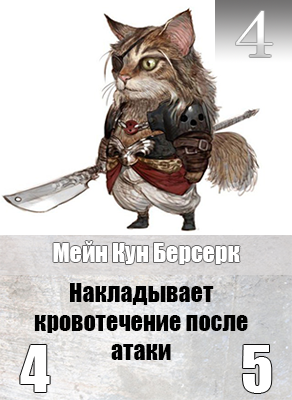
<style>
.page{position:relative;width:292px;height:400px;background:#ffffff}
.page>*{position:absolute;margin:0}
.t1{font:65.6px "Century";color:#ffffff;scale:1.18 1}
.t2{font:24px "Impact";color:#ffffff}
.t3{font:24px "Impact";color:#000000}
</style>
<div class="page">
<p class="t1" style="left:236px;top:11px;width:37px;height:46px">4</p>
<p class="t2" style="left:53px;top:241px;width:187px;height:23px">Мейн Кун Берсерк</p>
<p class="t3" style="left:34px;top:283px;width:214px;height:77px;text-align:center">Накладывает кровотечение после атаки</p>
</div>
